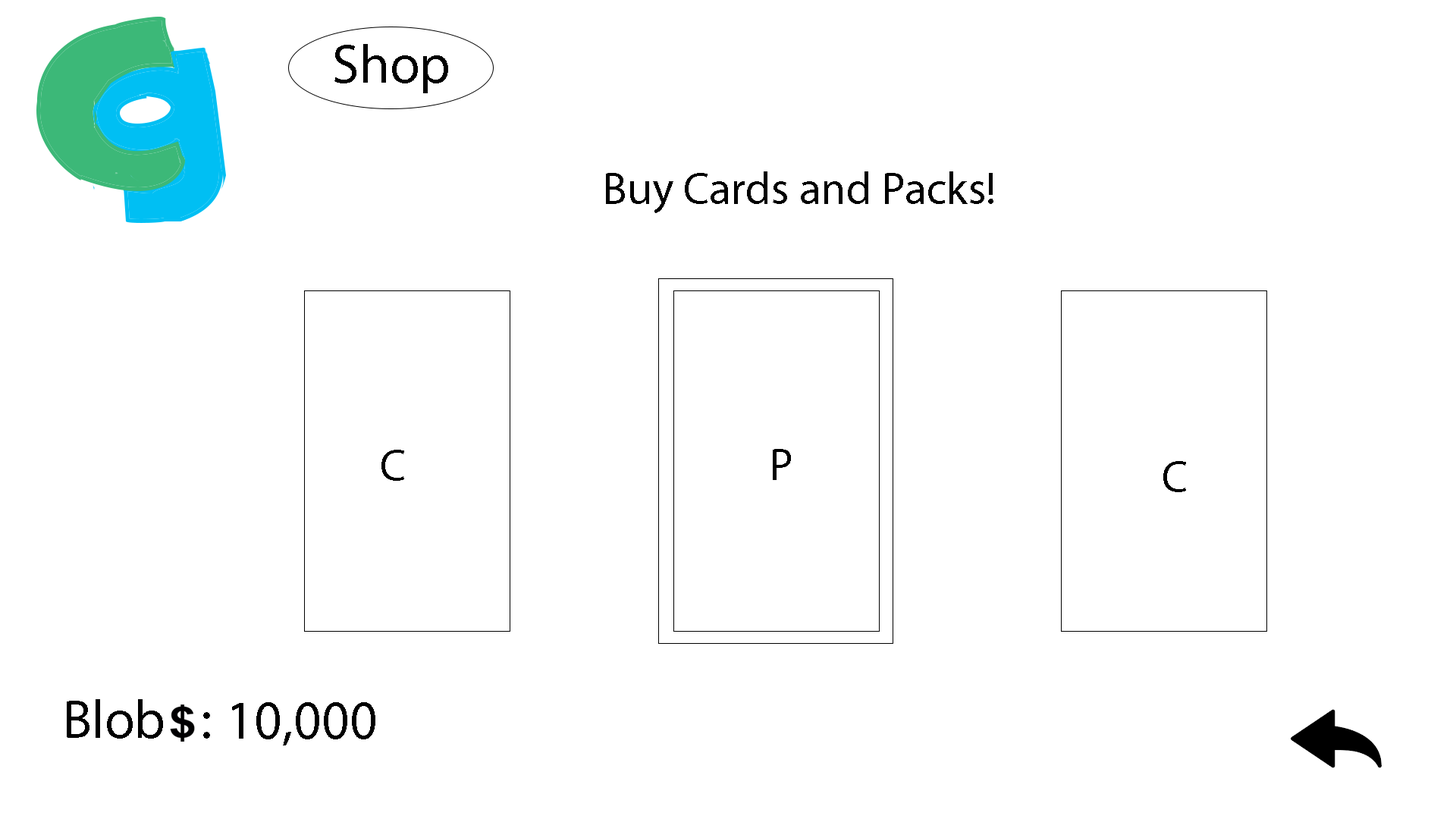
<style>
.page{position:relative;width:1456px;height:819px;background:#ffffff}
.page>*{position:absolute;margin:0}
.t1{font:54.6px "MyriadPro-Regular";color:#000000}
.t2{font:45.5px "MyriadPro-Regular";color:#000000}
</style>
<div class="page">
<p class="t1" style="left:334px;top:44px;width:114px;height:49px">Shop</p>
<p class="t2" style="left:606px;top:171px;width:387px;height:42px">Buy Cards and Packs!</p>
<p class="t2" style="left:381px;top:450px;width:23px;height:31px">C</p>
<p class="t2" style="left:773px;top:449px;width:18px;height:31px">P</p>
<p class="t2" style="left:1163px;top:461px;width:23px;height:31px">C</p>
<p class="t1" style="left:67px;top:699px;width:143px;height:40px">Blob   :</p>
<p class="t1" style="left:232px;top:702px;width:143px;height:43px">10,000</p>
</div>
